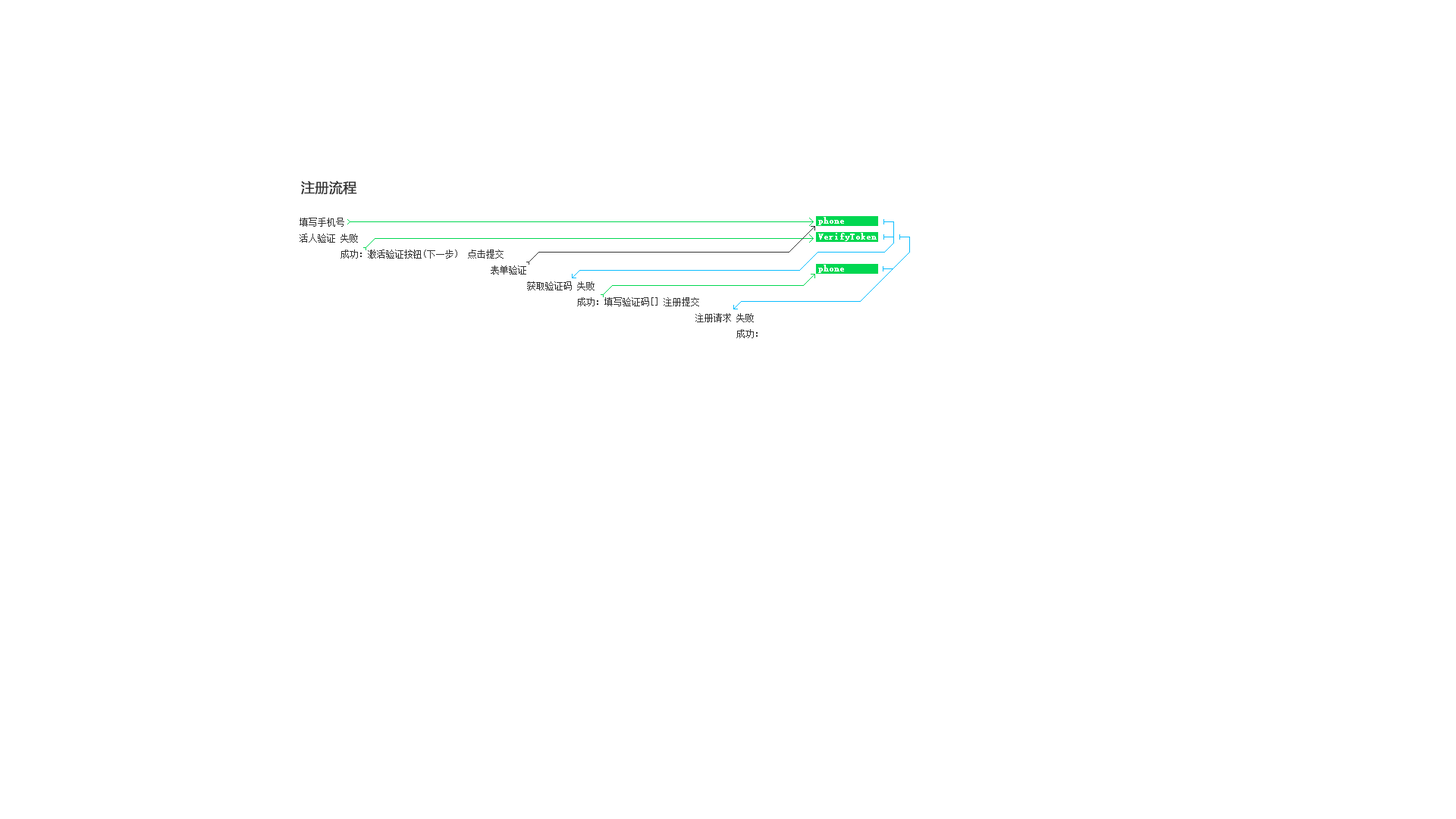
<style>
.page{position:relative;width:1456px;height:819px;background:#ffffff}
.page>*{position:absolute;margin:0}
.t1{font:13.6px "MicrosoftYaHei";color:#333333;font-weight:bold}
.t2{font:9.1px "SimSun";color:#333333}
</style>
<div class="page">
<p class="t1" style="left:301px;top:180px;width:56px;height:15px">注册流程</p>
<p class="t2" style="left:300px;top:218px;width:458px;height:120px">填写手机号 <br>活人验证 失败 <br>         成功：激活验证按钮(下一步)  点击提交                              <br>                                          表单验证      <br>                                                  获取验证码 失败  <br>                                                             成功：填写验证码[] 注册提交  <br>                                                                                       注册请求 失败<br>                                                                                                成功：</p>
</div>
